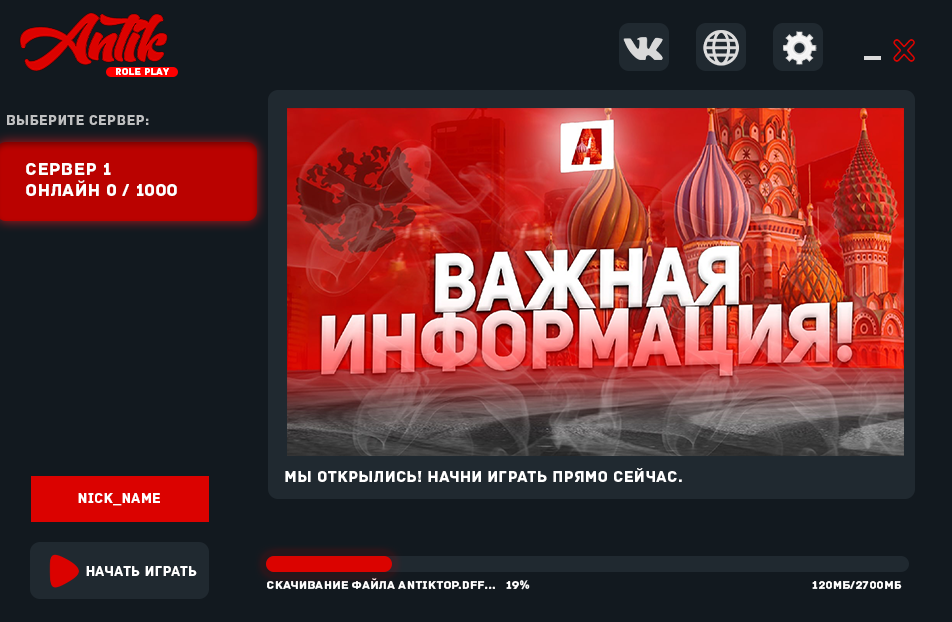
<style>
.page{position:relative;width:952px;height:622px;background:#12191f}
.page>*{position:absolute;margin:0}
.t1{font:10px "Archive";letter-spacing:0.025em;color:#ffffff}
.t2{font:14px "Archive";letter-spacing:0.025em;color:#bfc0c1}
.t3{font:18px "Archive";letter-spacing:0.025em;color:#bfc0c1}
.t4{font:18px "Archive";letter-spacing:0.025em;color:#ffffff}
.t5{font:16px "Archive";letter-spacing:0.025em;color:#ffffff}
.t6{font:14px "Archive";letter-spacing:0.025em;color:#ffffff}
.t7{font:12px "Archive";letter-spacing:0.025em;color:#ffffff}
</style>
<div class="page">
<p class="t1" style="left:116px;top:68px;width:53px;height:7px">role play</p>
<p class="t2" style="left:7px;top:115px;width:142px;height:10px"><span class="t3"><br></span>выберите сервер:</p>
<p class="t4" style="left:26px;top:163px;width:151px;height:33px">сервер 1 <br>Онлайн 0 / 1000</p>
<p class="t5" style="left:285px;top:468px;width:397px;height:14px">МЫ ОТКРЫЛИСЬ! НАЧНИ ИГРАТЬ ПРЯМО СЕЙЧАС.</p>
<p class="t6" style="left:78px;top:493px;width:82px;height:13px">Nick_Name</p>
<p class="t6" style="left:86px;top:566px;width:111px;height:10px">начать играть</p>
<p class="t7" style="left:267px;top:578px;width:228px;height:11px">скачивание файла ANTIKTOP.dff...</p>
<p class="t7" style="left:506px;top:580px;width:24px;height:10px">19%</p>
<p class="t7" style="left:812px;top:581px;width:90px;height:8px">120мб/2700мб</p>
</div>
